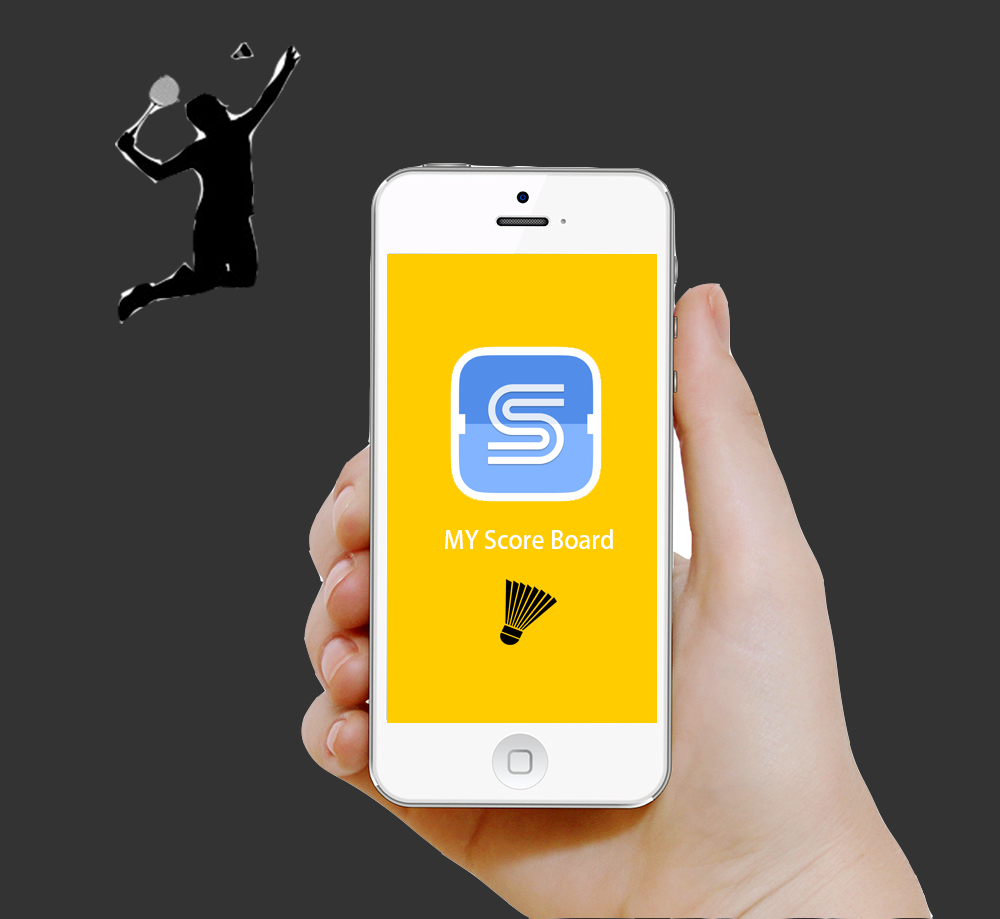
<style>
.page{position:relative;width:1000px;height:919px;background:#333333}
.page>*{position:absolute;margin:0}
.t1{font:24px "AdobeFanHeitiStd-Bold";color:#ffffff}
</style>
<div class="page">
<p class="t1" style="left:445px;top:529px;width:168px;height:20px">MY Score Board</p>
</div>
